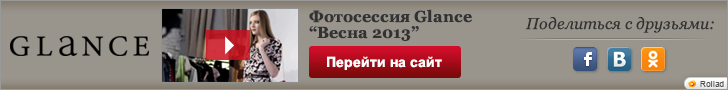
<style>
.page{position:relative;width:728px;height:90px;background:#99958c}
.page>*{position:absolute;margin:0}
.t1{font:16px/11px "Georgia-Bold";color:#323232}
.t2{font:16px/6px "Georgia-Bold";color:#323232}
.t3{font:16px "Georgia-Italic";color:#333333}
.t4{font:14px "Arial-BoldMT";color:#ffffff}
.t5{font:8px "ArialMT";letter-spacing:0.04em;color:#4c4c4c}
</style>
<div class="page">
<p class="t1" style="left:309px;top:9px;width:163px;height:32px">Фотосессия Glance<br><span class="t2">“Весна 2013”</span></p>
<p class="t3" style="left:525px;top:17px;width:189px;height:16px">Поделиться с друзьями:</p>
<p class="t4" style="left:327px;top:56px;width:115px;height:14px">Перейти на сайт</p>
<p class="t5" style="left:700px;top:81px;width:24px;height:6px">Rollad</p>
</div>
